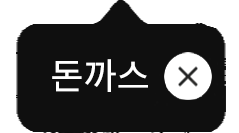
<style>
.page{position:relative;width:239px;height:133px;background:#0f0f0f}
.page>*{position:absolute;margin:0}
.t1{font:36px "NotoSansKR-Regular";color:#ffffff}
</style>
<div class="page">
<p class="t1" style="left:52px;top:59px;width:96px;height:33px">돈까스</p>
</div>
